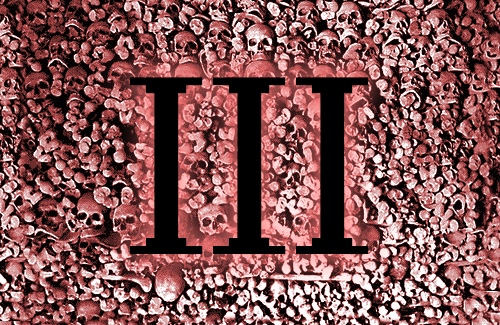
<style>
.page{position:relative;width:500px;height:325px}
.page>*{position:absolute;margin:0}
.t1{font:257px "MS Serif";letter-spacing:-0.02em;color:#000000}
</style>
<div class="page">
<p class="t1" style="left:130px;top:77px;width:239px;height:177px">III</p>
</div>
